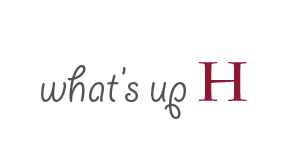
<style>
.page{position:relative;width:288px;height:144px;background:#ffffff}
.page>*{position:absolute;margin:0}
.t1{font:55px "GiddyupStd";color:#50544e}
.t2{font:55px "CharlemagneStd-Bold";color:#8f1831}
</style>
<div class="page">
<p class="t1" style="left:41px;top:62px;width:206px;height:57px">what’s up <span class="t2">H</span></p>
</div>
